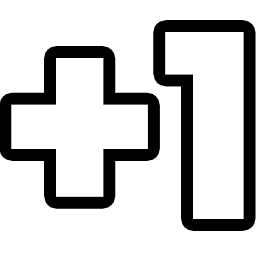
<style>
.page{position:relative;width:256px;height:256px;background:#ffffff}
.page>*{position:absolute;margin:0}
.t1{font:281px "Mont-HeavyDEMO";color:#ffffff}
</style>
<div class="page">
<p class="t1" style="left:11px;top:32px;width:233px;height:187px">+1</p>
</div>
